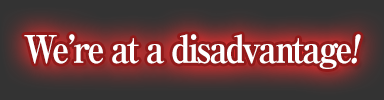
<style>
.page{position:relative;width:384px;height:100px;background:#333333}
.page>*{position:absolute;margin:0}
.t1{font:38px "RyuminPro-ExBold";letter-spacing:-0.08em;color:#ffffff;scale:0.9 1}
.t2{font:38px "RyuminPro-ExBold";letter-spacing:-0.08em;color:#ffffff;font-style:italic;scale:0.9 1}
</style>
<div class="page">
<p class="t1" style="left:24px;top:34px;width:337px;height:35px">We’re at a disadvantage<span class="t2">!</span></p>
</div>
